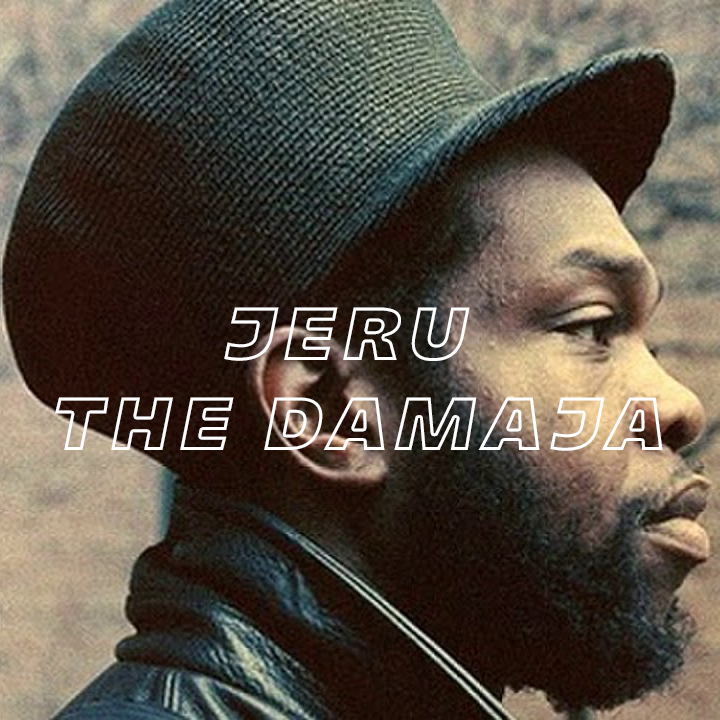
<style>
.page{position:relative;width:720px;height:720px}
.page>*{position:absolute;margin:0}
.t1{font:75px "Majoris-Italic";letter-spacing:0.1em;text-transform:uppercase}
</style>
<div class="page">
<p class="t1" style="left:55px;top:307px;width:608px;height:144px;text-align:center">Jeru <br>The Damaja</p>
</div>
